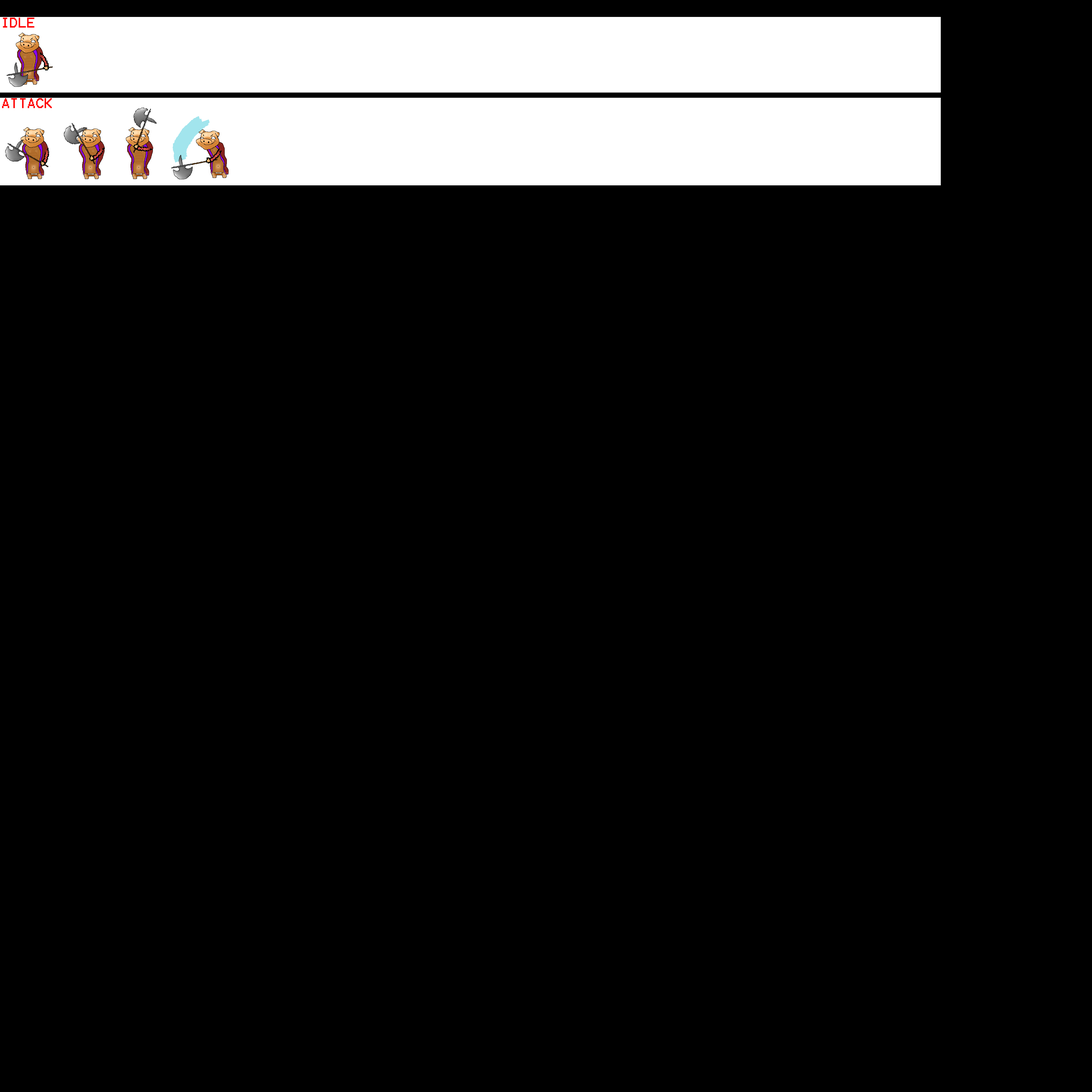
<style>
.page{position:relative;width:1092px;height:1092px;background:#000000}
.page>*{position:absolute;margin:0}
.t1{font:11.4px "Terminal";color:#ff0000}
</style>
<div class="page">
<p class="t1" style="left:3px;top:17px;width:31px;height:11px">IDLE</p>
<p class="t1" style="left:2px;top:98px;width:50px;height:10px">ATTACK</p>
</div>
